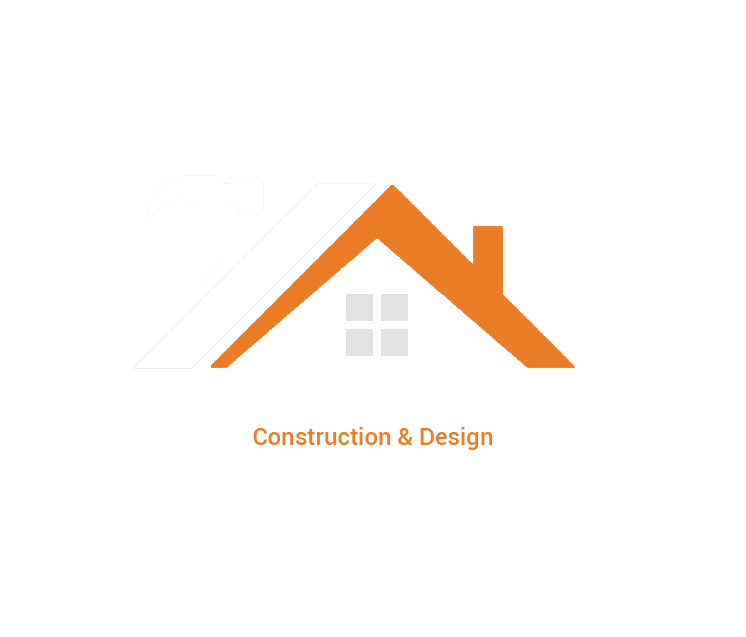
<style>
.page{position:relative;width:746px;height:637px;background:#ffffff}
.page>*{position:absolute;margin:0}
.t1{font:24px "Roboto-Medium";color:#eb7d26}
</style>
<div class="page">
<p class="t1" style="left:253px;top:427px;width:240px;height:23px">Construction &amp; Design</p>
</div>
